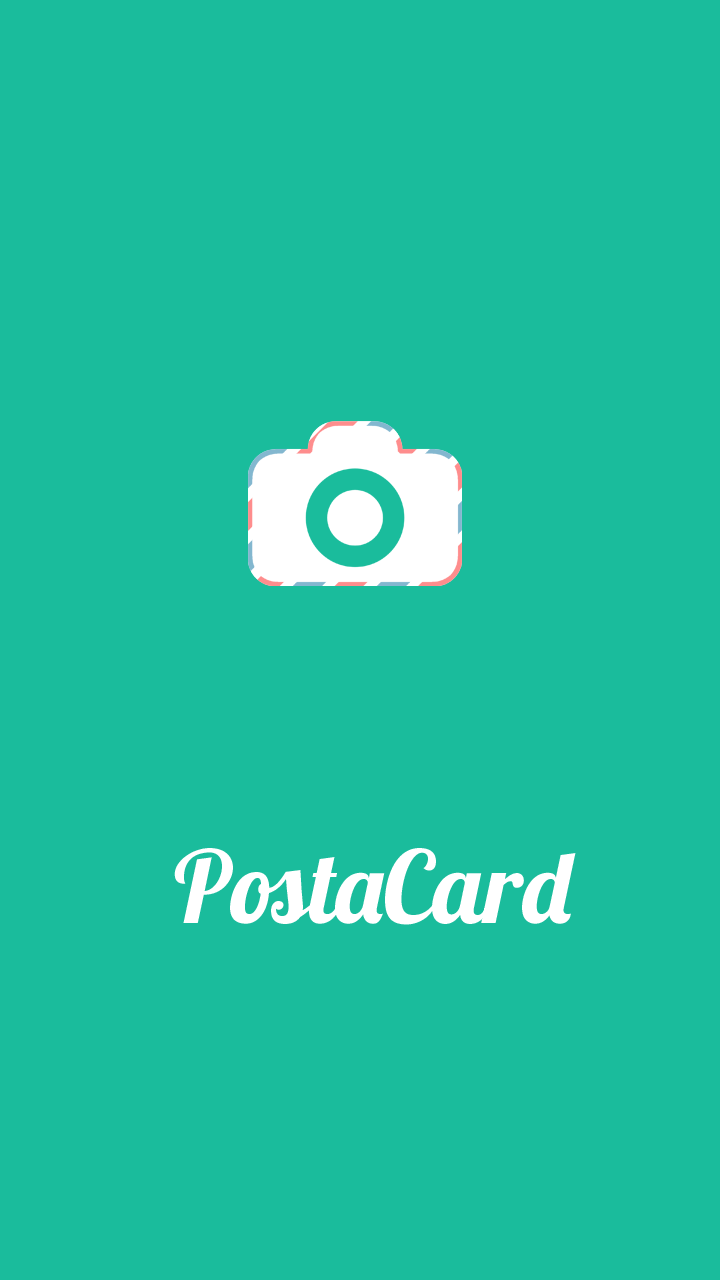
<style>
.page{position:relative;width:720px;height:1280px;background:#1abc9c}
.page>*{position:absolute;margin:0}
.t1{font:100px "Lobster1.4";color:#ffffff}
</style>
<div class="page">
<p class="t1" style="left:174px;top:848px;width:402px;height:77px">PostaCard</p>
</div>
